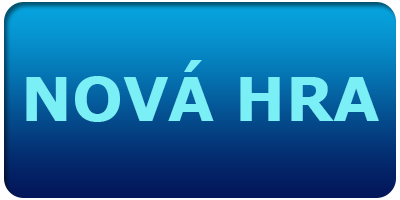
<style>
.page{position:relative;width:400px;height:200px}
.page>*{position:absolute;margin:0}
.t1{font:60px "Verdana-Bold";color:#7aeff6}
</style>
<div class="page">
<p class="t1" style="left:26px;top:60px;width:353px;height:62px">NOVÁ HRA</p>
</div>
